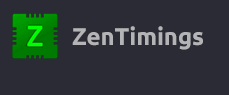
<style>
.page{position:relative;width:229px;height:95px;background:#2a2b34}
.page>*{position:absolute;margin:0}
.t1{font:24px "Ubuntu-Bold";color:#b4b4b6}
</style>
<div class="page">
<p class="t1" style="left:72px;top:26px;width:131px;height:24px">ZenTimings</p>
</div>
